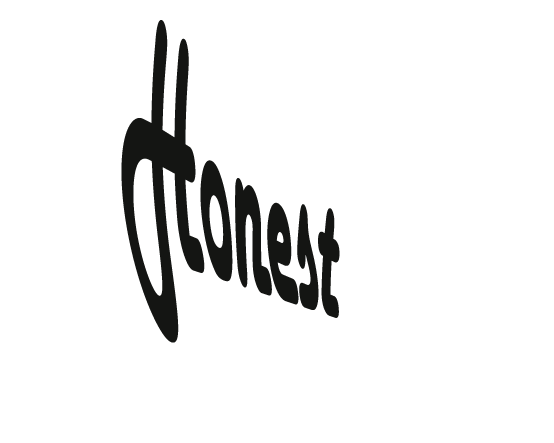
<style>
.page{position:relative;width:554px;height:443px;background:#ffffff}
.page>*{position:absolute;margin:0}
.t1{font:56.6px "HarlowSolid";color:#141513;scale:0.89 1}
</style>
<div class="page">
<p class="t1" style="left:121px;top:20px;width:219px;height:323px;text-align:right">Honest</p>
</div>
